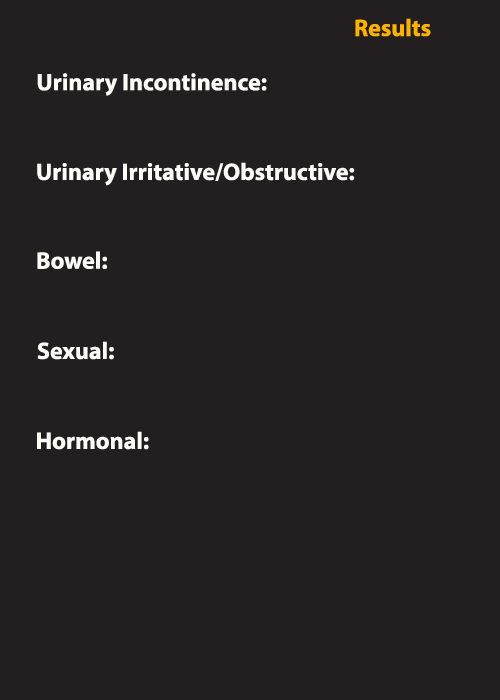
<style>
.page{position:relative;width:500px;height:700px;background:#231f20}
.page>*{position:absolute;margin:0}
.t1{font:24px "MyriadPro-Bold";color:#ffb300}
.t2{font:24px "MyriadPro-Bold";color:#fffcf8}
</style>
<div class="page">
<p class="t1" style="left:355px;top:18px;width:76px;height:19px">Results</p>
<p class="t2" style="left:37px;top:73px;width:230px;height:23px">Urinary Incontinence:</p>
<p class="t2" style="left:37px;top:162px;width:318px;height:24px">Urinary Irritative/Obstructive:</p>
<p class="t2" style="left:37px;top:251px;width:70px;height:18px">Bowel:</p>
<p class="t2" style="left:37px;top:341px;width:77px;height:19px">Sexual:</p>
<p class="t2" style="left:37px;top:431px;width:112px;height:19px">Hormonal:</p>
</div>
